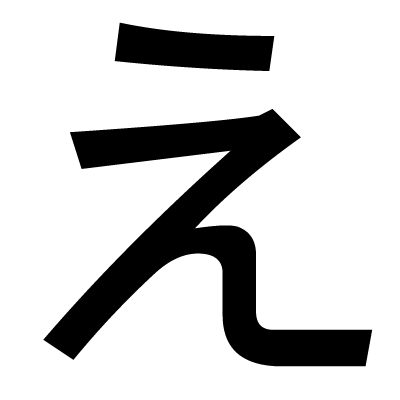
<style>
.page{position:relative;width:400px;height:400px;background:#ffffff}
.page>*{position:absolute;margin:0}
.t1{font:424.8px "MS-PGothic";color:#000000}
</style>
<div class="page">
<p class="t1" style="left:43px;top:22px;width:330px;height:345px">え</p>
</div>
